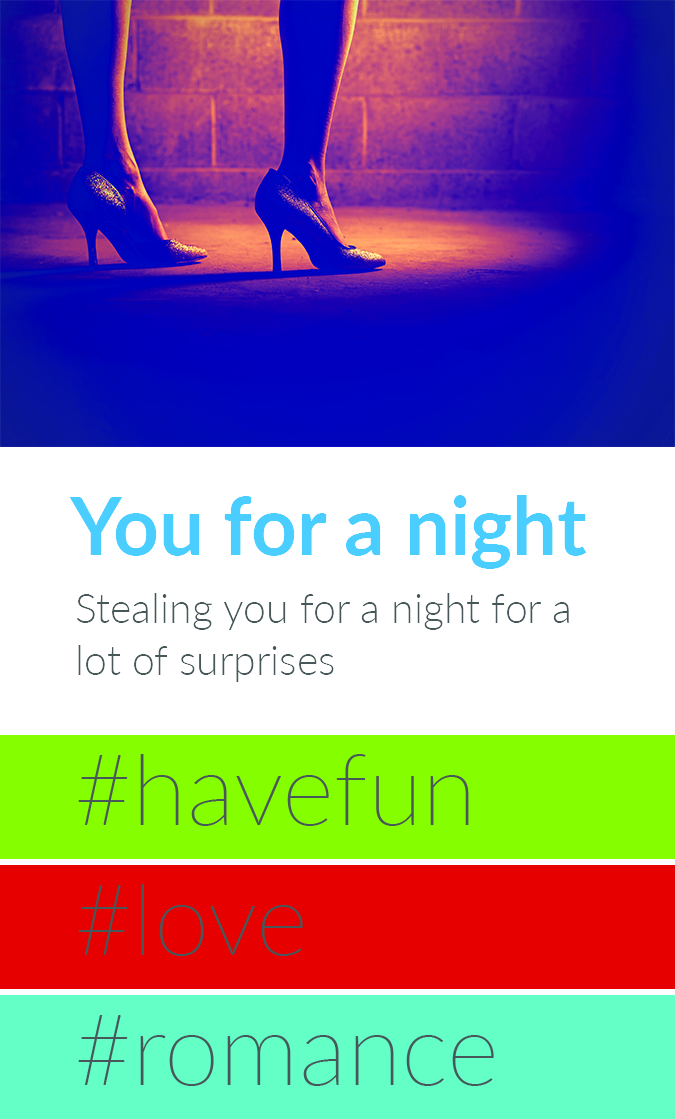
<style>
.page{position:relative;width:675px;height:1119px;background:#ffffff}
.page>*{position:absolute;margin:0}
.t1{font:80px "Lato-Bold";color:#4acdff}
.t2{font:41px/52px "Lato-Light";color:#48585a}
</style>
<div class="page">
<p class="t1" style="left:69px;top:495px;width:518px;height:74px">You for a night</p>
<p class="t2" style="left:76px;top:593px;width:493px;height:89px;text-align:right">Stealing you for a night for a lot of surprises</p>
</div>
